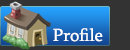
<style>
.page{position:relative;width:130px;height:50px;background:#333333}
.page>*{position:absolute;margin:0}
.t1{font:18px "Sylfaen";color:#ffffff}
</style>
<div class="page">
<p class="t1" style="left:53px;top:28px;width:50px;height:14px">Profile</p>
</div>
